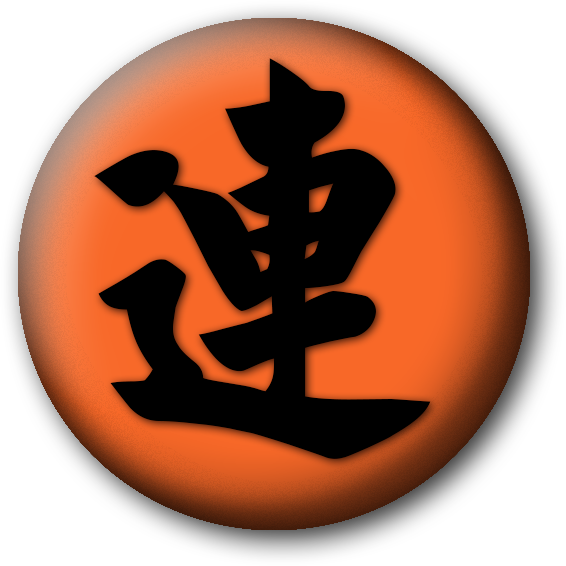
<style>
.page{position:relative;width:566px;height:566px}
.page>*{position:absolute;margin:0}
.t1{font:440.6px "¾­µä·±Ã«¿¬ Regular";color:#000000}
</style>
<div class="page">
<p class="t1" style="left:94px;top:58px;width:337px;height:401px">连</p>
</div>
